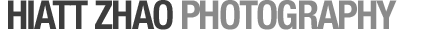
<style>
.page{position:relative;width:421px;height:30px;background:#ffffff}
.page>*{position:absolute;margin:0}
.t1{font:40px "HelveticaNeue-CondensedBold";letter-spacing:-0.05em;color:#8a8a8a}
.t2{font:40px "HelveticaNeue-CondensedBold";letter-spacing:-0.05em;color:#3d3d3d}
</style>
<div class="page">
<p class="t1" style="left:8px;top:0px;width:389px;height:30px"><span class="t2">HIATT ZHAO </span>PHOTOGRAPHY</p>
</div>
